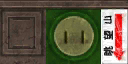
<style>
.page{position:relative;width:128px;height:64px}
.page>*{position:absolute;margin:0}
.t1{font:10px "NotoSansCJKsc-Regular";color:#232222;font-weight:bold}
</style>
<div class="page">
<p class="t1" style="left:103px;top:30px;width:11px;height:26px;rotate:-89deg">眺  望</p>
</div>
